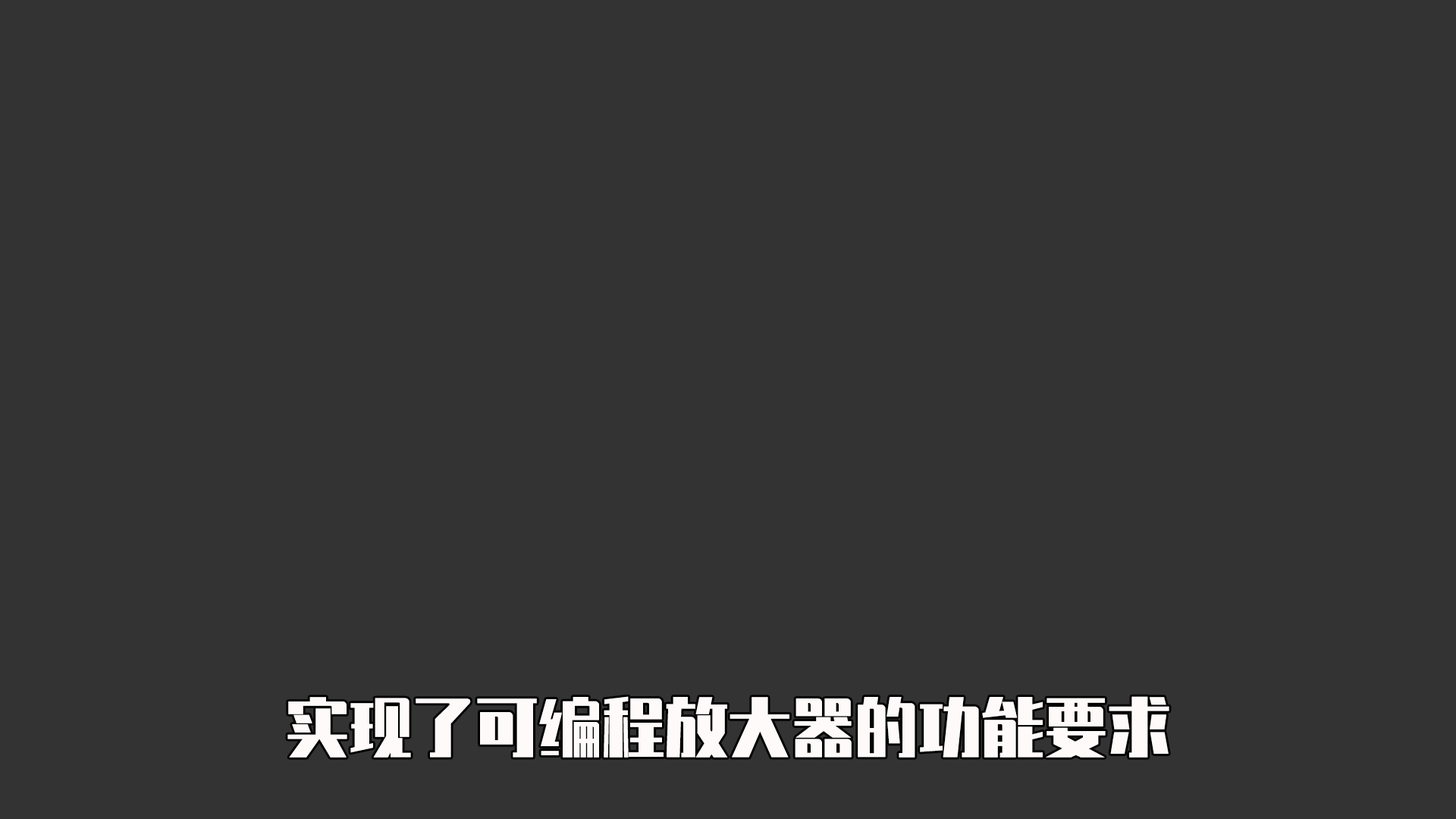
<style>
.page{position:relative;width:1456px;height:819px;background:#333333}
.page>*{position:absolute;margin:0}
.t1{font:63.2px "ZhenyanGB-Regular";color:#fefafa}
</style>
<div class="page">
<p class="t1" style="left:287px;top:696px;width:882px;height:62px">实现了可编程放大器的功能要求</p>
</div>
